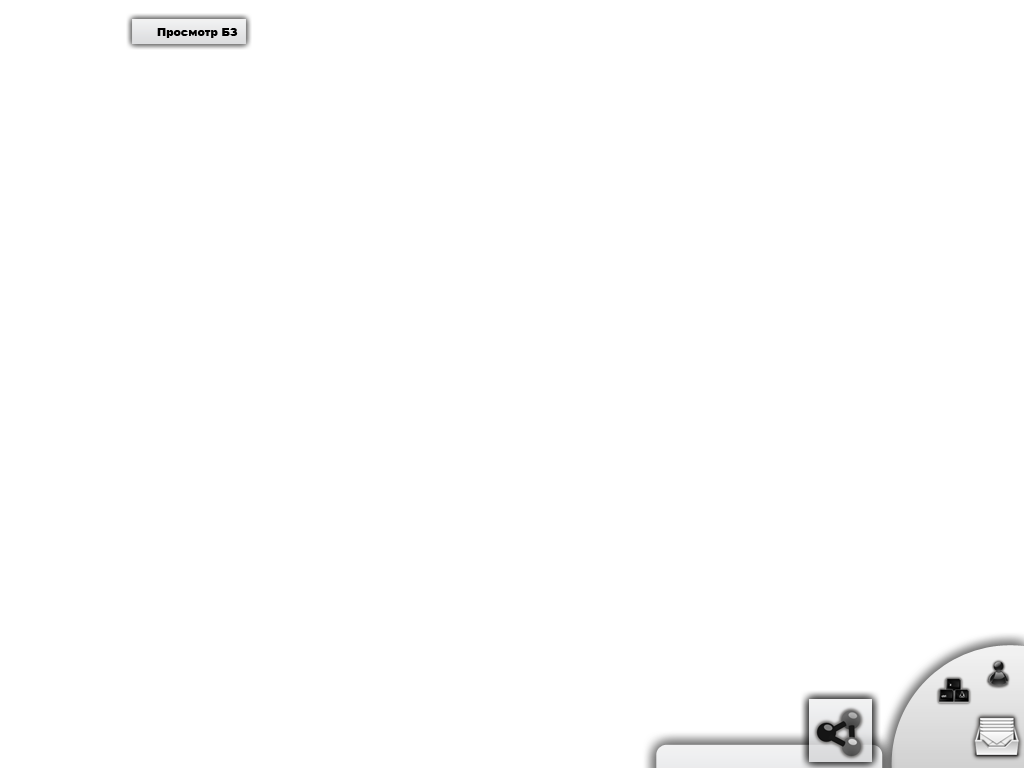
<style>
.page{position:relative;width:1024px;height:768px;background:#ffffff}
.page>*{position:absolute;margin:0}
.t1{font:11px "Arial-Black";color:#000000}
</style>
<div class="page">
<p class="t1" style="left:157px;top:28px;width:81px;height:10px">Просмотр БЗ</p>
</div>
